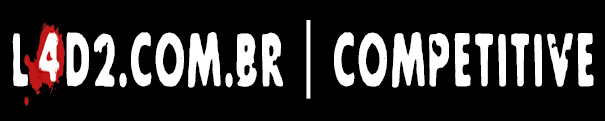
<style>
.page{position:relative;width:605px;height:121px;background:#000000}
.page>*{position:absolute;margin:0}
.t1{font:74.3px "Future-Rot";letter-spacing:0.029em;color:#ffffff;scale:0.49 1}
.t2{font:74.3px "SolanoGothicMVB-Bd";letter-spacing:0.029em;color:#ffffff;scale:0.49 1}
</style>
<div class="page">
<p class="t1" style="left:12px;top:20px;width:582px;height:79px">L  D2.COM.BR <span class="t2">|</span> COMPETITIVE</p>
</div>
